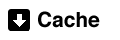
<style>
.page{position:relative;width:120px;height:40px;background:#ffffff}
.page>*{position:absolute;margin:0}
.t1{font:20.8px "Helvetica-Bold";color:#000000}
</style>
<div class="page">
<p class="t1" style="left:38px;top:11px;width:62px;height:17px">Cache</p>
</div>
